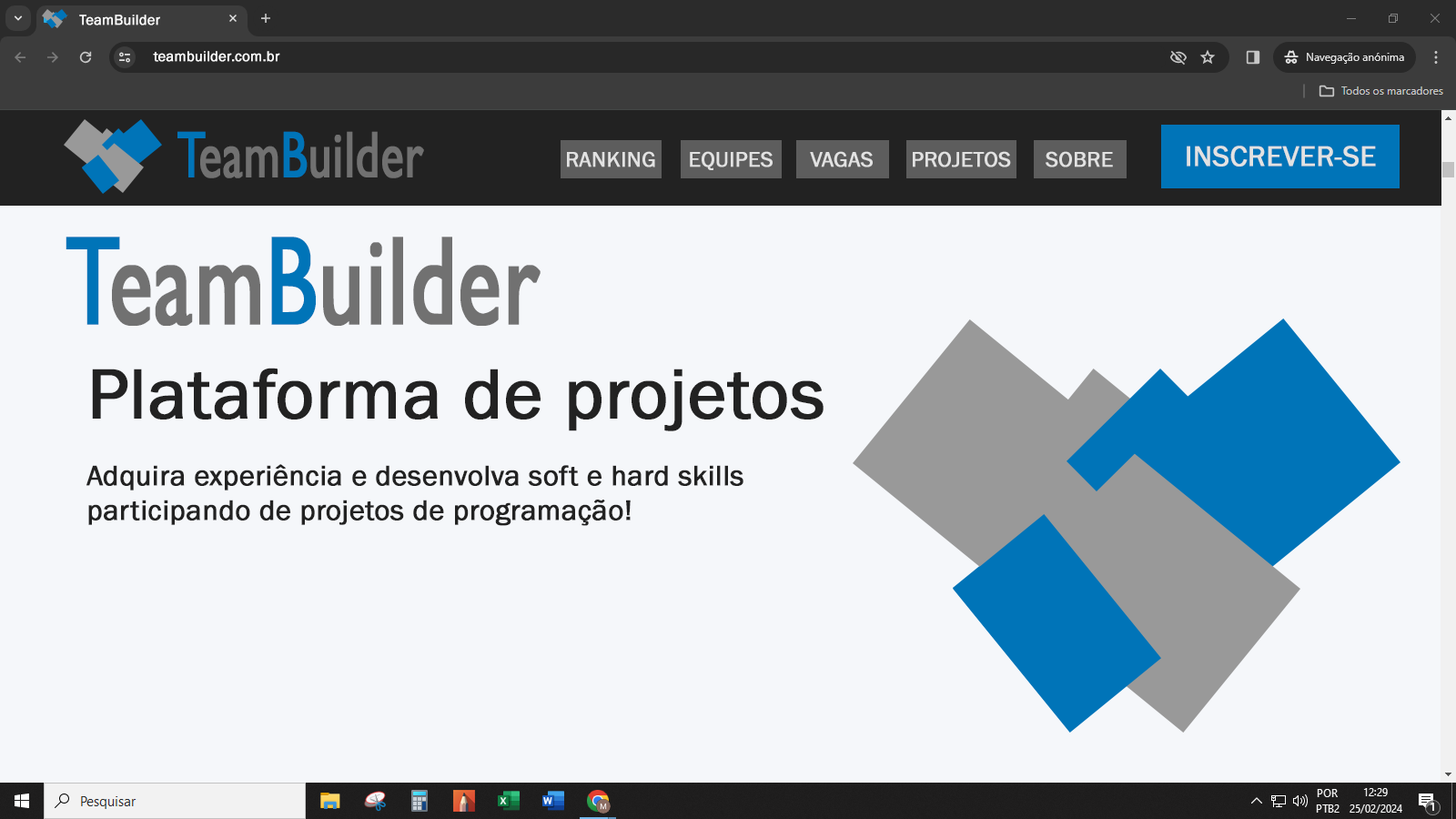
<style>
.page{position:relative;width:1456px;height:819px;background:#f5f7fa}
.page>*{position:absolute;margin:0}
.t1{font:10.9px "FranklinGothic-Book";color:#ffffff;font-weight:bold}
.t2{font:14.6px "FranklinGothic-Book";color:#ffffff;font-weight:bold}
.t3{font:65.8px "GillSansMT";color:#717171;font-weight:bold;scale:0.71 1}
.t4{font:65.8px "GillSansMT";color:#0074b8;font-weight:bold;scale:0.71 1}
.t5{font:29.1px "FranklinGothic-Book";color:#e2e2e2;font-weight:bold}
.t6{font:21.8px "FranklinGothic-Book";color:#e2e2e2;font-weight:bold}
.t7{font:126.4px "GillSansMT";color:#717171;font-weight:bold;scale:0.71 1}
.t8{font:126.4px "GillSansMT";color:#0074b8;font-weight:bold;scale:0.71 1}
.t9{font:72.8px "FranklinGothic-Book";color:#222222;font-weight:bold}
.t10{font:29.1px "FranklinGothic-Book";color:#222222;font-weight:bold}
</style>
<div class="page">
<p class="t1" style="left:79px;top:15px;width:81px;height:10px">TeamBuilder</p>
<p class="t2" style="left:153px;top:51px;width:127px;height:11px">teambuilder.com.br</p>
<p class="t3" style="left:177px;top:131px;width:247px;height:47px"><span class="t4">T</span>eam<span class="t4">B</span>uilder</p>
<p class="t5" style="left:1187px;top:146px;width:189px;height:21px">INSCREVER-SE</p>
<p class="t6" style="left:567px;top:151px;width:88px;height:16px">RANKING</p>
<p class="t6" style="left:690px;top:151px;width:83px;height:19px">EQUIPES</p>
<p class="t6" style="left:810px;top:151px;width:63px;height:16px">VAGAS</p>
<p class="t6" style="left:913px;top:151px;width:98px;height:16px">PROJETOS</p>
<p class="t6" style="left:1046px;top:151px;width:67px;height:16px">SOBRE</p>
<p class="t7" style="left:66px;top:237px;width:475px;height:89px"><span class="t8">T</span>eam<span class="t8">B</span>uilder</p>
<p class="t9" style="left:92px;top:368px;width:732px;height:63px">Plataforma de projetos</p>
<p class="t10" style="left:86px;top:464px;width:657px;height:62px">Adquira experiência e desenvolva soft e hard skills participando de projetos de programação!</p>
</div>
